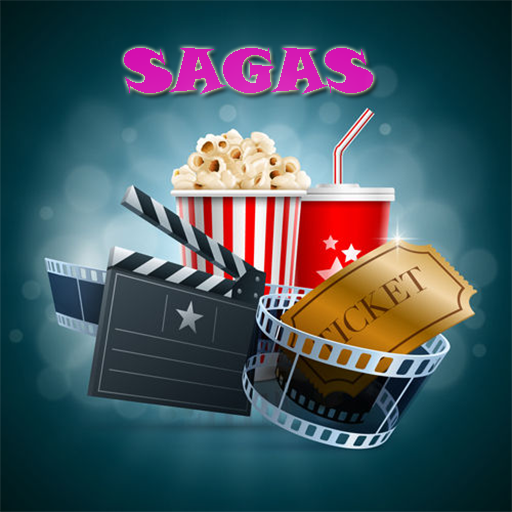
<style>
.page{position:relative;width:512px;height:512px}
.page>*{position:absolute;margin:0}
.t1{font:60px "SnapITC-Regular";color:#d61bb4}
</style>
<div class="page">
<p class="t1" style="left:124px;top:48px;width:249px;height:46px">SAGAS</p>
</div>
